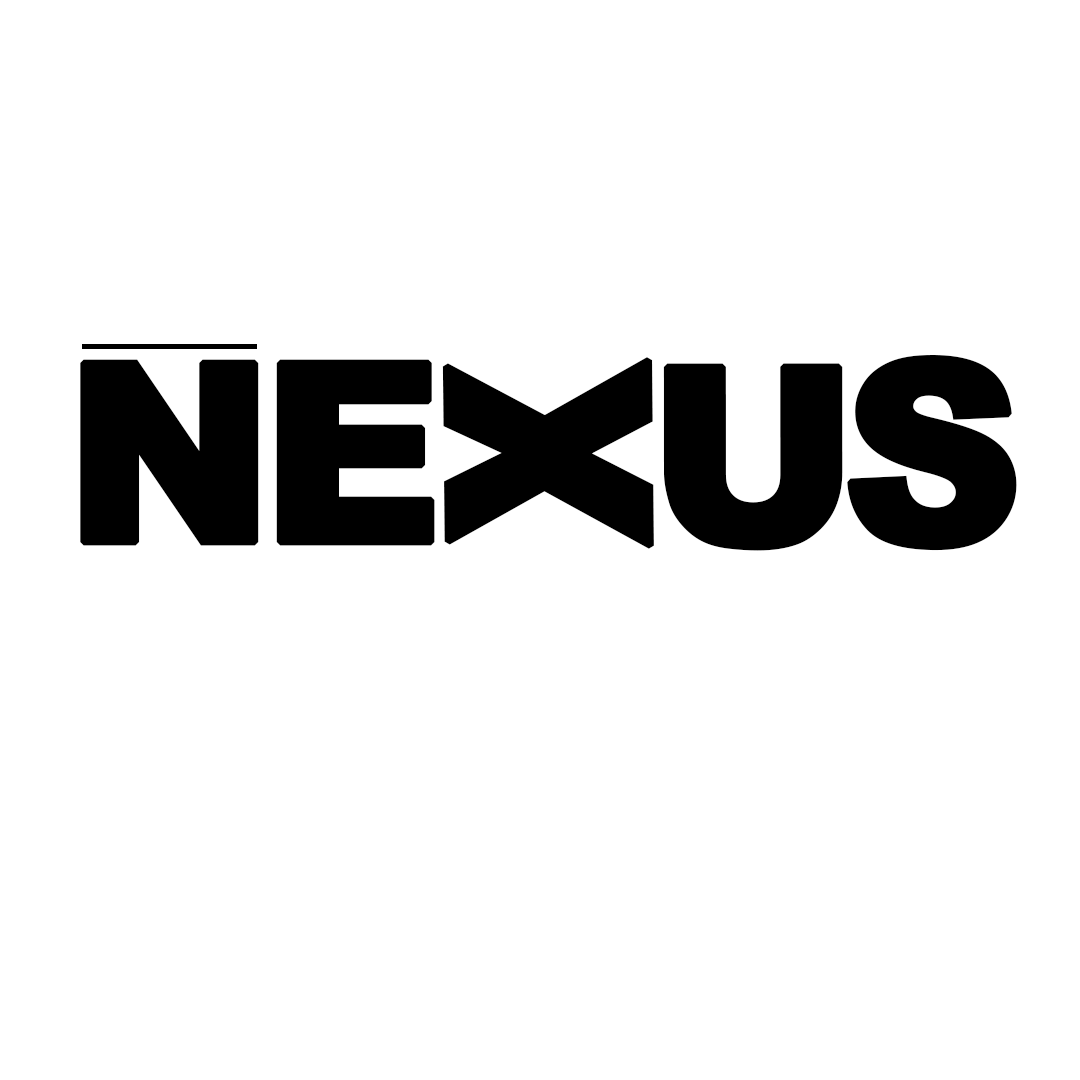
<style>
.page{position:relative;width:1080px;height:1080px;background:#ffffff}
.page>*{position:absolute;margin:0}
.t1{font:250px "Arial-Black";color:#000000;font-weight:bold}
.t2{font:282.8px "Arial-Black";color:#000000;font-weight:bold;scale:0.84 1}
.t3{font:247.2px "Arial-Black";color:#000000;font-weight:bold}
.t4{font:254.4px "Arial-Black";color:#000000;font-weight:bold}
</style>
<div class="page">
<p class="t1" style="left:80px;top:359px;width:179px;height:187px">N</p>
<p class="t1" style="left:276px;top:359px;width:159px;height:187px">E</p>
<p class="t2" style="left:442px;top:357px;width:212px;height:192px;rotate:-91deg">X</p>
<p class="t3" style="left:663px;top:363px;width:180px;height:188px">U</p>
<p class="t4" style="left:847px;top:355px;width:170px;height:196px;rotate:1deg">S</p>
</div>
